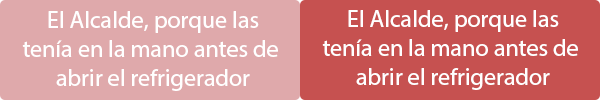
<style>
.page{position:relative;width:600px;height:100px;background:#c65150}
.page>*{position:absolute;margin:0}
.t1{font:24px "MyriadHebrew-Regular";color:#ffffff}
</style>
<div class="page">
<p class="t1" style="left:22px;top:11px;width:256px;height:80px;text-align:center">El Alcalde, porque las<br>tenía en la mano antes de <br>abrir el refrigerador</p>
<p class="t1" style="left:322px;top:10px;width:256px;height:80px;text-align:center">El Alcalde, porque las<br>tenía en la mano antes de <br>abrir el refrigerador</p>
</div>
